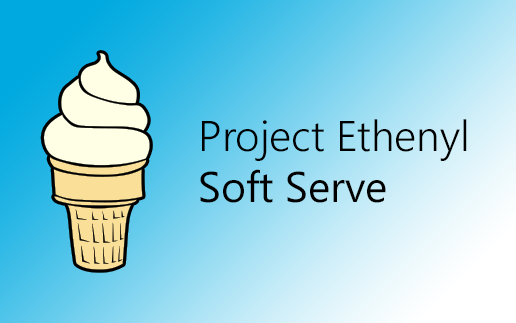
<style>
.page{position:relative;width:516px;height:323px}
.page>*{position:absolute;margin:0}
.t1{font:42.7px "SegoeUI-Semilight";color:#000000}
.t2{font:42.7px "SegoeUI";color:#000000}
</style>
<div class="page">
<p class="t1" style="left:200px;top:119px;width:267px;height:84px">Project Ethenyl<br><span class="t2">Soft Serve</span></p>
</div>
